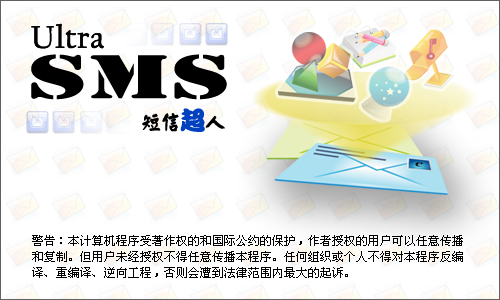
<style>
.page{position:relative;width:500px;height:300px;background:#ffffff}
.page>*{position:absolute;margin:0}
.t1{font:32.1px "CalifornianFB-Reg";color:#000000;font-weight:bold}
.t2{font:64.2px "Stencil";color:#000000;scale:1.66 1}
.t3{font:19.2px "DATK8";color:#000000}
.t4{font:25.7px "DATX1";color:#0041c0}
.t5{font:12px/16px "SimSun";color:#000000}
</style>
<div class="page">
<p class="t1" style="left:31px;top:23px;width:73px;height:26px">Ultra</p>
<p class="t2" style="left:31px;top:54px;width:196px;height:46px">SMS</p>
<p class="t3" style="left:142px;top:108px;width:83px;height:24px">短信<span class="t4">超</span>人</p>
<p class="t5" style="left:32px;top:235px;width:431px;height:43px">警告：本计算机程序受著作权的和国际公约的保护，作者授权的用户可以任意传播<br>和复制。但用户未经授权不得任意传播本程序。任何组织或个人不得对本程序反编<br>译、重编译、逆向工程，否则会遭到法律范围内最大的起诉。</p>
</div>
